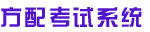
<style>
.page{position:relative;width:150px;height:32px;background:#ffffff}
.page>*{position:absolute;margin:0}
.t1{font:21.9px "FZZYJW--GB1-0";letter-spacing:0.1em;color:#5016c7}
</style>
<div class="page">
<p class="t1" style="left:1px;top:6px;width:141px;height:21px">方配考试系统</p>
</div>
